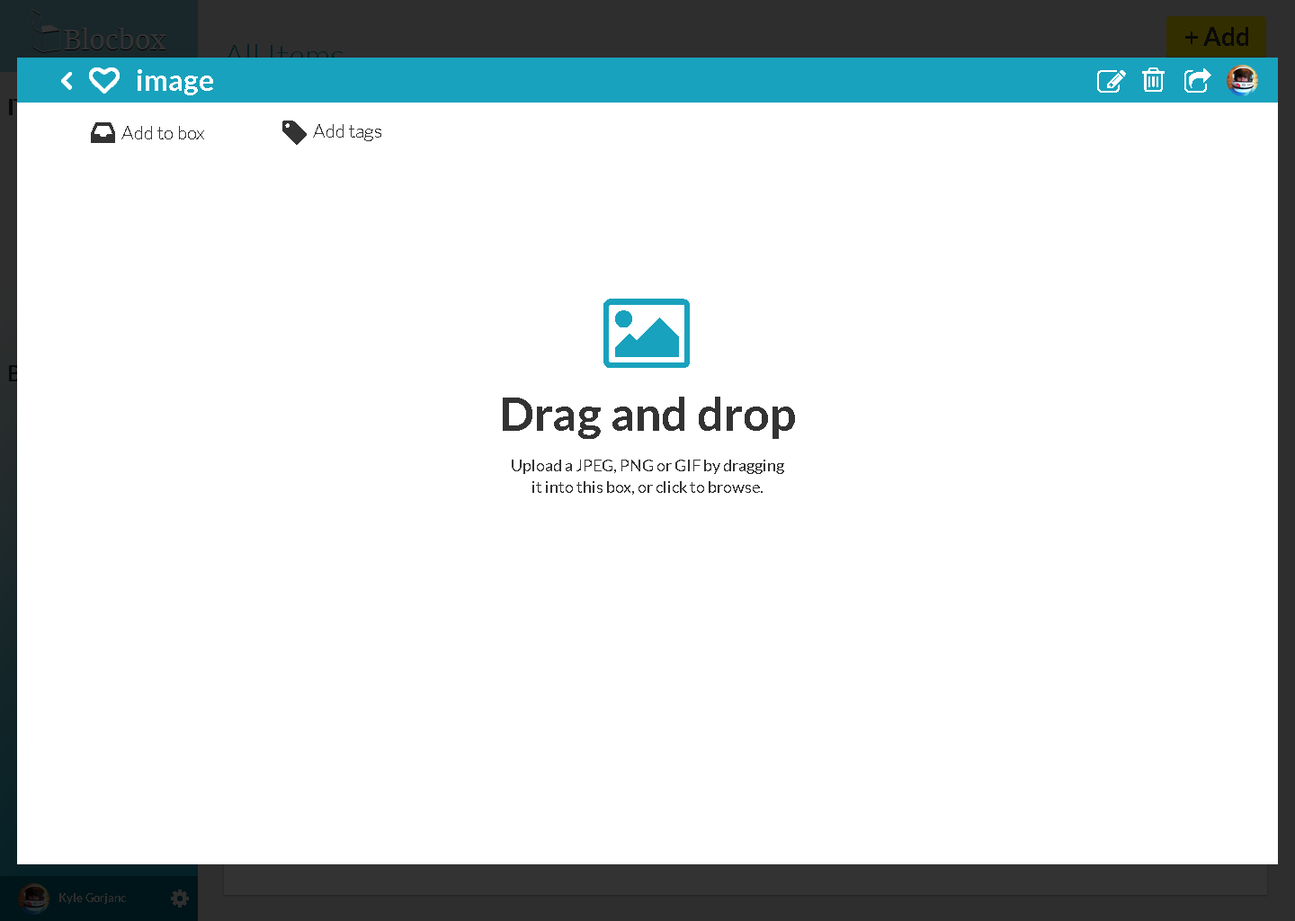
<style>
.page{position:relative;width:1295px;height:921px;background:#ffffff}
.page>*{position:absolute;margin:0}
.t1{font:25.6px "Lato-Bold";color:#0a0a0a}
.t2{font:32.4px "Lato-Light"}
.t3{font:28.8px "Lato-Bold";color:#ffffff}
.t4{font:19.2px "Lato-Light";color:#333333}
.t5{font:46.8px "Lato-Bold";color:#333333}
.t6{font:16.2px/21.6px "Lato-Regular";color:#333333}
.t7{font:11.7px "Lato-Bold";color:#2e2e2e}
</style>
<div class="page">
<p class="t1" style="left:1185px;top:27px;width:63px;height:19px">+ Add</p>
<p class="t2" style="left:224px;top:44px;width:119px;height:23px">All Items</p>
<p class="t3" style="left:138px;top:69px;width:75px;height:26px">image</p>
<p class="t4" style="left:121px;top:126px;width:83px;height:13px">Add to box</p>
<p class="t4" style="left:313px;top:124px;width:68px;height:17px">Add tags</p>
<p class="t5" style="left:503px;top:397px;width:292px;height:42px">Drag and drop</p>
<p class="t6" style="left:512px;top:460px;width:272px;height:35px;text-align:center">Upload a JPEG, PNG or GIF by dragging <br>it into this box, or click to browse.</p>
<p class="t7" style="left:59px;top:893px;width:67px;height:11px">Kyle Gorjanc</p>
</div>
